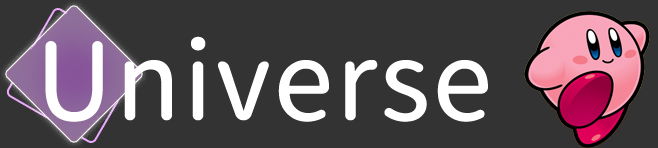
<style>
.page{position:relative;width:658px;height:148px;background:#333333}
.page>*{position:absolute;margin:0}
.t1{font:106.7px "GenJyuuGothic-P-Regular";color:#ffffff;font-weight:bold}
</style>
<div class="page">
<p class="t1" style="left:45px;top:36px;width:443px;height:86px">Universe</p>
</div>
